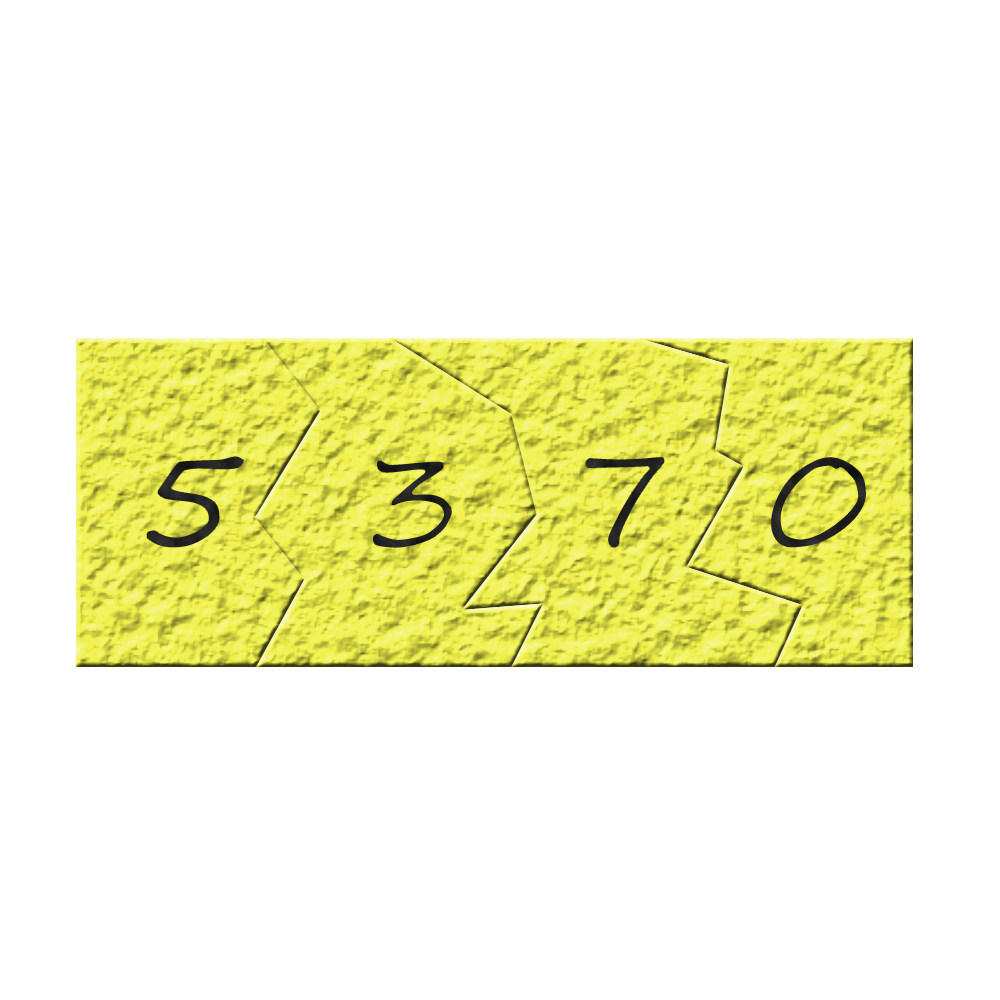
<style>
.page{position:relative;width:1000px;height:1000px;background:#ffffff}
.page>*{position:absolute;margin:0}
.t1{font:140px "SegoeScript";color:#272726}
.t2{font:140px "SegoeScript"}
.t3{font:140px "SegoeScript";color:#242424}
</style>
<div class="page">
<p class="t1" style="left:145px;top:455px;width:100px;height:94px">5</p>
<p class="t2" style="left:371px;top:458px;width:83px;height:92px">3</p>
<p class="t3" style="left:584px;top:456px;width:82px;height:93px">7</p>
<p class="t2" style="left:769px;top:455px;width:99px;height:95px">0</p>
</div>
